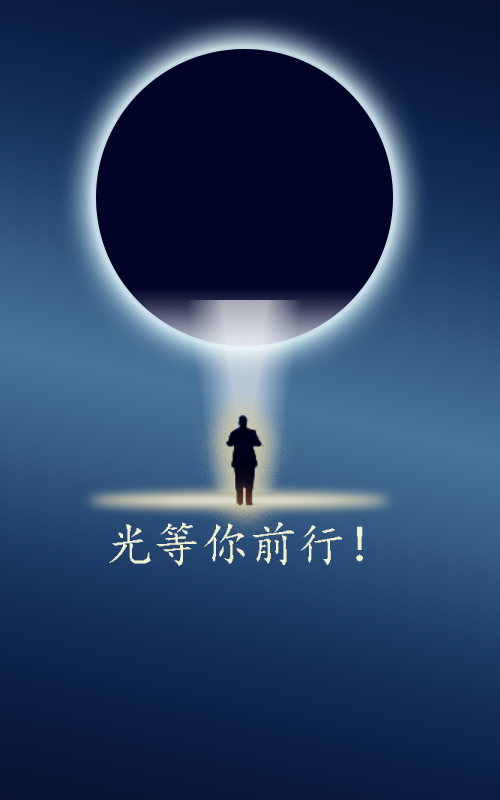
<style>
.page{position:relative;width:500px;height:800px}
.page>*{position:absolute;margin:0}
.t1{font:48px "¿¬Ìå";color:#f0f2d3}
</style>
<div class="page">
<p class="t1" style="left:109px;top:522px;width:254px;height:44px">光等你前行！</p>
</div>
